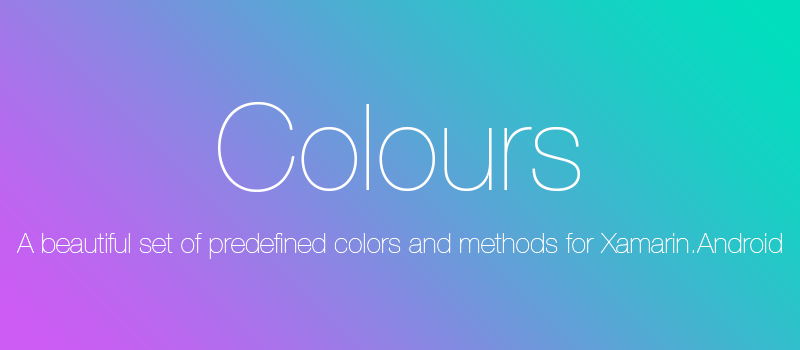
<style>
.page{position:relative;width:800px;height:350px}
.page>*{position:absolute;margin:0}
.t1{font:120px "HelveticaNeueLTStd-UltLt";color:#ffffff}
.t2{font:28px "HelveticaNeueLTStd-UltLt";color:#ffffff}
</style>
<div class="page">
<p class="t1" style="left:218px;top:101px;width:362px;height:92px">Colours</p>
<p class="t2" style="left:17px;top:233px;width:765px;height:26px">A beautiful set of predefined colors and methods for Xamarin.Android</p>
</div>
